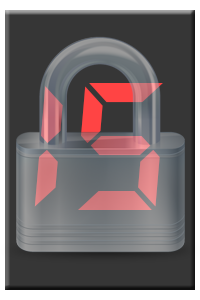
<style>
.page{position:relative;width:200px;height:300px;background:#363636}
.page>*{position:absolute;margin:0}
.t1{font:200px "LetsgoDigital-Regular"}
</style>
<div class="page">
<p class="t1" style="left:34px;top:83px;width:129px;height:127px">15</p>
</div>
